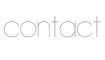
<style>
.page{position:relative;width:105px;height:60px;background:#ffffff}
.page>*{position:absolute;margin:0}
.t1{font:20.8px "BondoluoPeek";color:#9a9a9a}
</style>
<div class="page">
<p class="t1" style="left:4px;top:16px;width:97px;height:22px">Contact</p>
</div>
